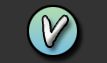
<style>
.page{position:relative;width:107px;height:63px;background:#333333}
.page>*{position:absolute;margin:0}
.t1{font:42.7px "PermanentMarker-Regular"}
</style>
<div class="page">
<p class="t1" style="left:42px;top:15px;width:27px;height:32px">V</p>
</div>
